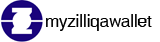
<style>
.page{position:relative;width:160px;height:42px;background:#ffffff}
.page>*{position:absolute;margin:0}
.t1{font:16.7px "Helvetica";color:#000000}
</style>
<div class="page">
<p class="t1" style="left:46px;top:14px;width:106px;height:17px">myzilliqawallet</p>
</div>
